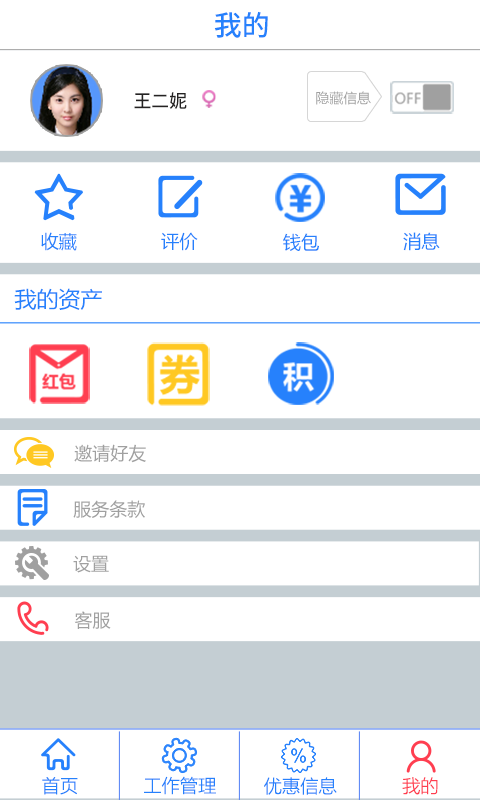
<style>
.page{position:relative;width:480px;height:800px;background:#ffffff}
.page>*{position:absolute;margin:0}
.t1{font:28px "NotoSansHans-Medium";color:#2681fc}
.t2{font:18.3px "NotoSansHans-Medium";color:#252323}
.t3{font:13.7px "MicrosoftYaHei";letter-spacing:0.01em;color:#a0a0a0}
.t4{font:18.3px "MicrosoftYaHei";color:#2681fc}
.t5{font:22px "MicrosoftYaHei";color:#2681fc}
.t6{font:18px "MicrosoftYaHei";color:#a0a0a0}
.t7{font:18.3px "MicrosoftYaHeiLight";color:#2681fc}
.t8{font:18.3px "MicrosoftYaHeiLight";color:#ff3e50}
</style>
<div class="page">
<p class="t1" style="left:214px;top:11px;width:54px;height:27px">我的</p>
<p class="t2" style="left:134px;top:92px;width:53px;height:17px">王二妮</p>
<p class="t3" style="left:316px;top:91px;width:55px;height:14px">隐藏信息</p>
<p class="t4" style="left:41px;top:232px;width:36px;height:19px">收藏</p>
<p class="t4" style="left:161px;top:232px;width:37px;height:19px">评价</p>
<p class="t4" style="left:283px;top:233px;width:36px;height:18px">钱包</p>
<p class="t4" style="left:403px;top:232px;width:37px;height:19px">消息</p>
<p class="t5" style="left:14px;top:288px;width:88px;height:22px">我的资产</p>
<p class="t6" style="left:74px;top:444px;width:72px;height:19px">邀请好友</p>
<p class="t6" style="left:73px;top:500px;width:72px;height:18px">服务条款</p>
<p class="t6" style="left:73px;top:555px;width:36px;height:18px">设置</p>
<p class="t6" style="left:74px;top:611px;width:37px;height:18px">客服</p>
<p class="t7" style="left:42px;top:777px;width:36px;height:18px">首页</p>
<p class="t7" style="left:144px;top:776px;width:72px;height:19px">工作管理</p>
<p class="t7" style="left:264px;top:777px;width:73px;height:18px">优惠信息</p>
<p class="t8" style="left:402px;top:777px;width:36px;height:18px">我的</p>
</div>
